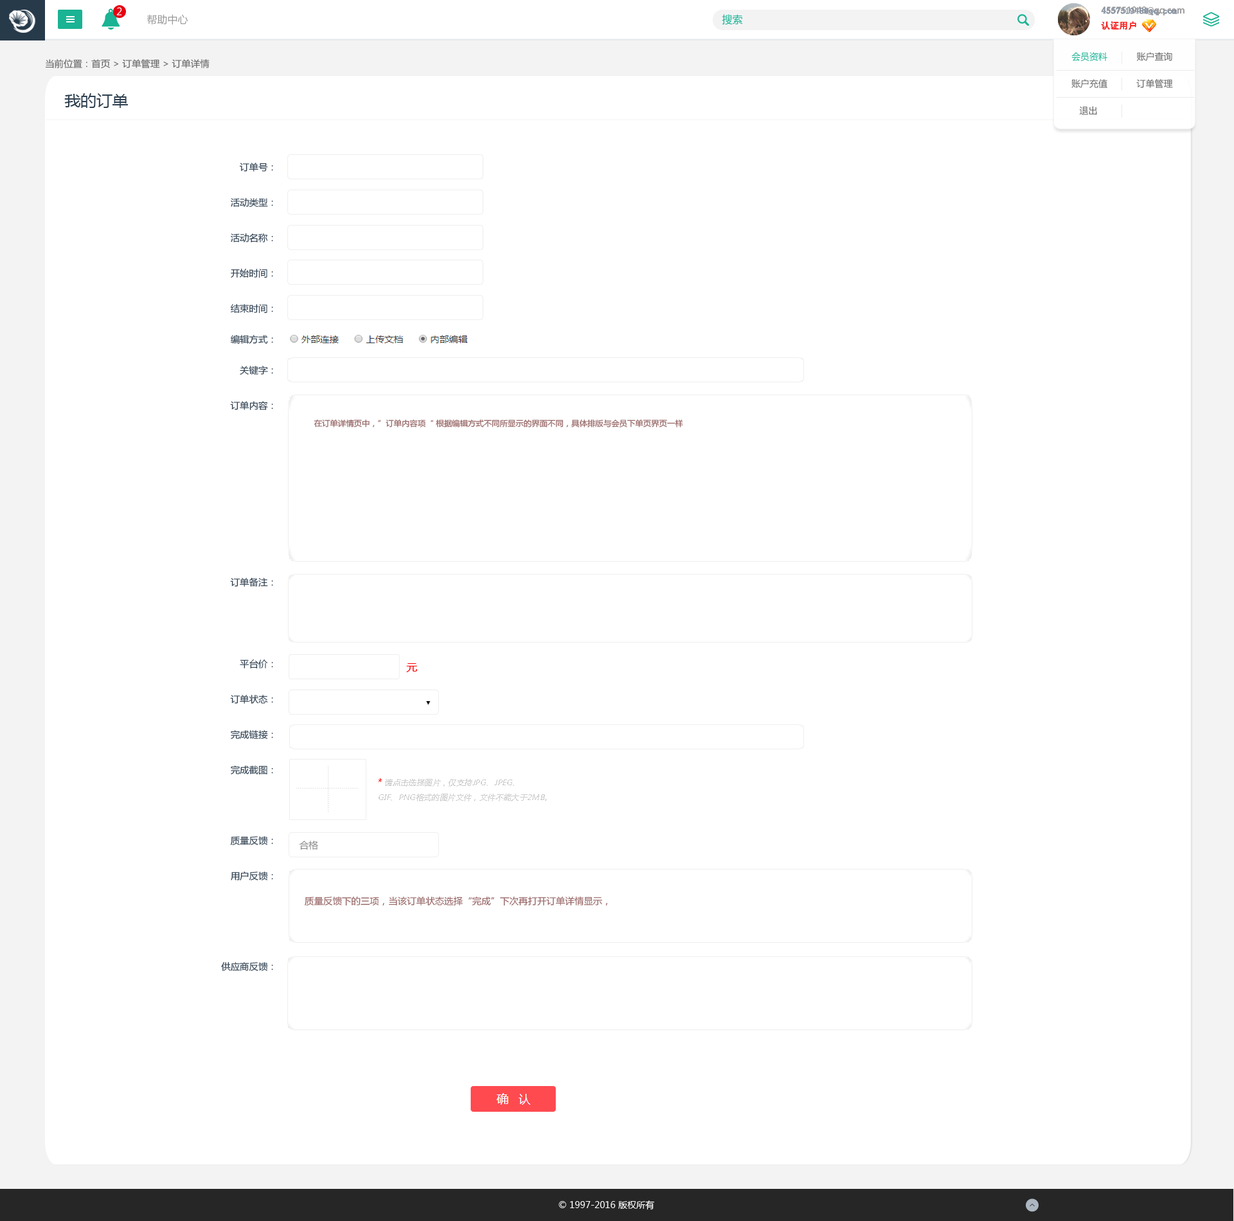
<style>
.page{position:relative;width:1234px;height:1221px;background:#ffffff}
.page>*{position:absolute;margin:0}
.t1{font:10.3px "MicrosoftYaHei";color:#ffffff}
.t2{font:10.3px "MicrosoftYaHei";color:#999999}
.t3{font:10.3px "MicrosoftYaHei";color:#1ab394}
.t4{font:9px/15.4px "AdobeHeitiStd-Regular";color:#999999}
.t5{font:9px/15.4px "AdobeHeitiStd-Regular";color:#f61e1e}
.t6{font:9px/15.4px "AdobeHeitiStd-Regular";color:#ffffff}
.t7{font:9px/15.4px "SimSun";color:#8894a4;font-weight:bold}
.t8{font:9px/15.4px "SimSun";color:#f61e1e}
.t9{font:9px/27px "MicrosoftYaHei";color:#666666}
.t10{font:9px/27px "MicrosoftYaHei";color:#1ab394}
.t11{font:9px "MicrosoftYaHei";color:#666666;scale:1.03 1}
.t12{font:15.4px "MicrosoftYaHei";color:#2f4050;scale:1.03 1}
.t13{font:9px/35.4px "MicrosoftYaHei";color:#2f4050;scale:1.03 1}
.t14{font:9px/30.9px "MicrosoftYaHei";color:#2f4050;scale:1.03 1}
.t15{font:7.7px "MicrosoftYaHei";color:#956262;scale:1.03 1}
.t16{font:10.3px "MicrosoftYaHei";color:#ff0107;scale:1.03 1}
.t17{font:7.7px "MicrosoftYaHei";color:#cccccc;font-style:italic;scale:1.03 1}
.t18{font:9px "MicrosoftYaHei";color:#ff0000;scale:1.03 1}
.t19{font:9px "MicrosoftYaHei";color:#8b8b8b;scale:1.03 1}
.t20{font:9px "MicrosoftYaHei";color:#956262;scale:1.03 1}
.t21{font:9px "MicrosoftYaHei";color:#ffffff}
</style>
<div class="page">
<p class="t1" style="left:116px;top:7px;width:6px;height:8px">2</p>
<p class="t2" style="left:147px;top:14px;width:41px;height:11px">帮助中心</p>
<p class="t3" style="left:722px;top:14px;width:21px;height:11px">搜索</p>
<p class="t4" style="left:1101px;top:6px;width:84px;height:24px">455751948@qq.com<br><span class="t5">认证用户               </span><span class="t6">退出</span></p>
<p class="t7" style="left:1101px;top:7px;width:77px;height:23px">455751948@qq.com<br><span class="t8">认证用户</span></p>
<p class="t9" style="left:1072px;top:52px;width:101px;height:63px"><span class="t10">会员资料</span>           账户查询<br>账户充值           订单管理           <br>   退出</p>
<p class="t11" style="left:45px;top:59px;width:165px;height:9px">当前位置：首页 &gt; 订单管理 &gt; 订单详情</p>
<p class="t12" style="left:64px;top:93px;width:64px;height:15px">我的订单</p>
<p class="t13" style="left:221px;top:163px;width:52px;height:808px;text-align:right">订单号：<br>活动类型：<br>活动名称：<br>开始时间：<br><span class="t14">结束时间：<br>编辑方式：<br></span>关键字：<br>订单内容：<br><br><br><br><br>订单备注：<br><br><br>平台价：<br>订单状态：<br>完成链接：<br>完成截图：<br><br>质量反馈：<br>用户反馈：<br><br><br>供应商反馈：</p>
<p class="t15" style="left:314px;top:419px;width:369px;height:9px">在订单详情页中，”订单内容项“ 根据编辑方式不同所显示的界面不同，具体排版与会员下单页界页一样</p>
<p class="t16" style="left:406px;top:663px;width:11px;height:9px">元</p>
<p class="t17" style="left:379px;top:779px;width:168px;height:23px"><span class="t18">* </span>请点击选择图片，仅支持JPG、JPEG、<br>GIF、PNG格式的图片文件，文件不能大于2MB。</p>
<p class="t19" style="left:299px;top:841px;width:19px;height:10px">合格</p>
<p class="t20" style="left:305px;top:897px;width:303px;height:9px">质量反馈下的三项，当该订单状态选择“完成”下次再打开订单详情显示，</p>
<p class="t21" style="left:559px;top:1201px;width:95px;height:9px">© 1997-2016 版权所有</p>
</div>
